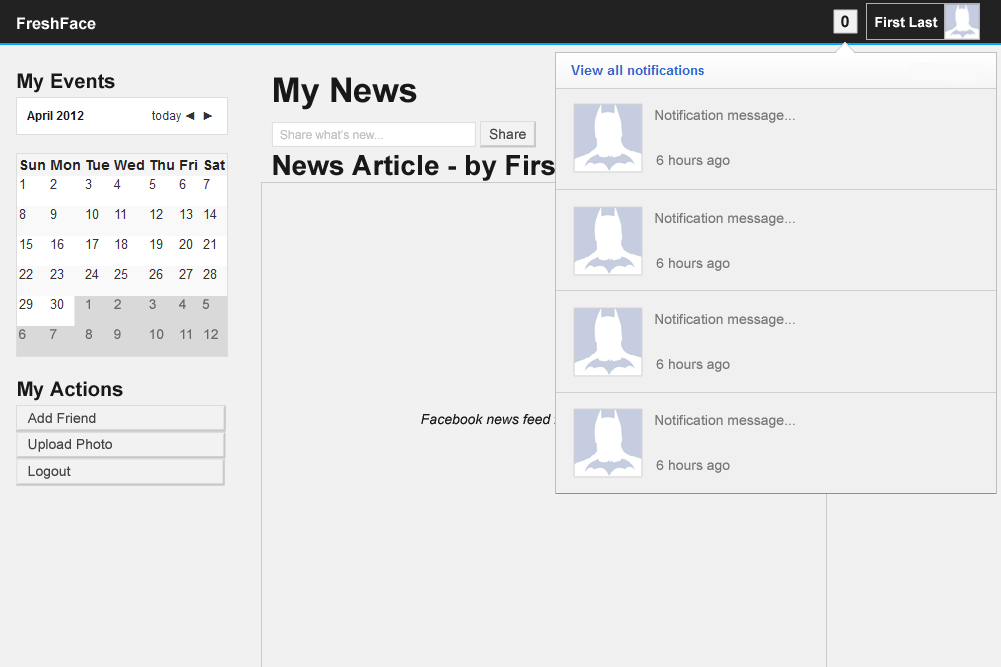
<style>
.page{position:relative;width:1001px;height:667px;background:#f1f1f1}
.page>*{position:absolute;margin:0}
.t1{font:16px "Arial-BoldMT";color:#ffffff}
.t2{font:16px "Arial-BoldMT";color:#181818}
.t3{font:14px "Arial-BoldMT";color:#ffffff}
.t4{font:20px "Arial-BoldMT";color:#181818}
.t5{font:34px "Arial-BoldMT";color:#181818}
.t6{font:12px "ArialMT";color:#c2c2c2}
.t7{font:14px "ArialMT";color:#444444}
.t8{font:28px "Arial-BoldMT";color:#181818}
.t9{font:14px "Arial-ItalicMT"}
</style>
<div class="page">
<p class="t1" style="left:17px;top:17px;width:79px;height:13px">FreshFace</p>
<p class="t2" style="left:841px;top:15px;width:8px;height:13px">0</p>
<p class="t3" style="left:875px;top:17px;width:63px;height:11px">First Last</p>
<p class="t4" style="left:17px;top:73px;width:98px;height:20px">My Events</p>
<p class="t5" style="left:274px;top:77px;width:143px;height:33px">My News</p>
<p class="t6" style="left:280px;top:130px;width:103px;height:10px">Share what’s new...</p>
<p class="t7" style="left:489px;top:128px;width:37px;height:12px">Share</p>
<p class="t8" style="left:273px;top:155px;width:358px;height:26px">News Article - by First Last</p>
<p class="t4" style="left:18px;top:381px;width:105px;height:20px">My Actions</p>
<p class="t7" style="left:27px;top:413px;width:69px;height:10px">Add Friend</p>
<p class="t9" style="left:421px;top:414px;width:251px;height:13px">Facebook news feed for logged in user...</p>
<p class="t7" style="left:28px;top:439px;width:84px;height:13px">Upload Photo</p>
<p class="t7" style="left:28px;top:466px;width:43px;height:13px">Logout</p>
</div>
